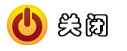
<style>
.page{position:relative;width:127px;height:51px;background:#ffffff}
.page>*{position:absolute;margin:0}
.t1{font:24px "STCaiyun";letter-spacing:0.12em;color:#0a0a0a;font-weight:bold}
</style>
<div class="page">
<p class="t1" style="left:58px;top:13px;width:50px;height:24px">关闭</p>
</div>
